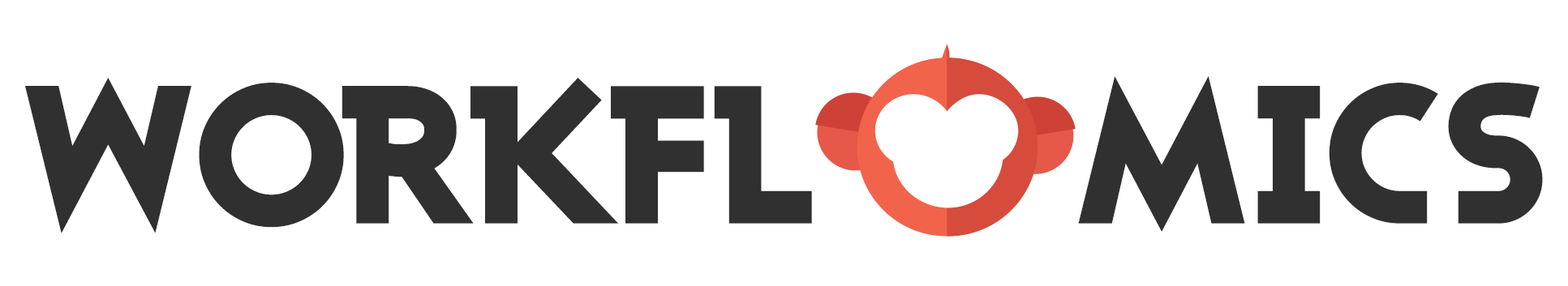
<style>
.page{position:relative;width:1568px;height:286px;background:#ffffff}
.page>*{position:absolute;margin:0}
.t1{font:194.6px "AshbyBlack";letter-spacing:-0.05em;color:#303030}
</style>
<div class="page">
<p class="t1" style="left:25px;top:76px;width:1518px;height:158px">WORKFL    MICS</p>
</div>
